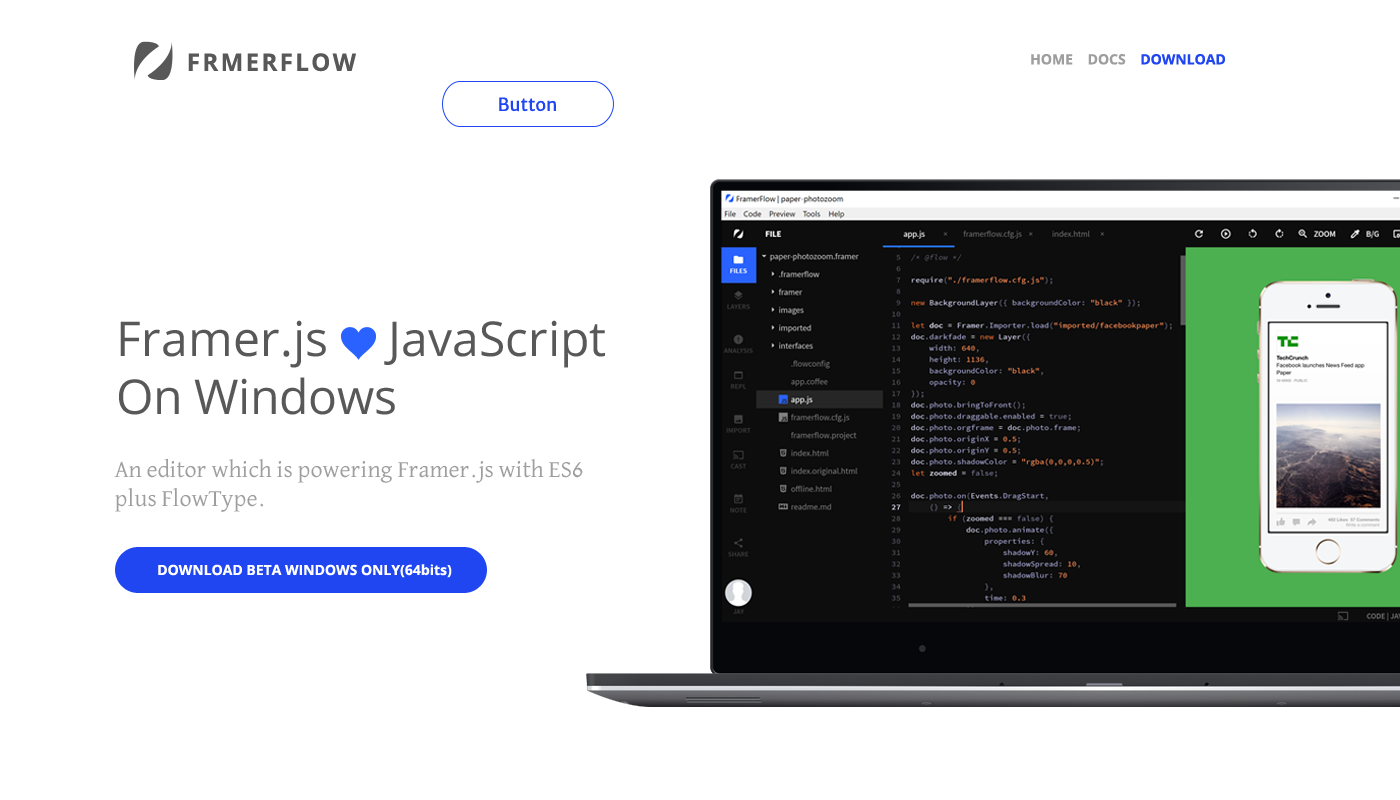
<style>
.page{position:relative;width:1400px;height:800px;background:#ffffff}
.page>*{position:absolute;margin:0}
.t1{font:24px "OpenSans-Bold";letter-spacing:0.1em;color:#585858}
.t2{font:14px "OpenSans-Bold";color:#9e9e9e}
.t3{font:14px "OpenSans-Bold";color:#2046f2}
.t4{font:18px "MerriweatherSans-Regular";color:#2046f2}
.t5{font:48px "OpenSans";color:#585858}
.t6{font:24px "DavidLibre-Regular";color:#9e9e9e}
.t7{font:14px "OpenSans-Bold";color:#ffffff}
</style>
<div class="page">
<p class="t1" style="left:188px;top:53px;width:168px;height:19px">FRMERFLOW</p>
<p class="t2" style="left:1031px;top:54px;width:194px;height:11px">HOME    DOCS    <span class="t3">DOWNLOAD</span></p>
<p class="t4" style="left:499px;top:97px;width:57px;height:15px">Button</p>
<p class="t5" style="left:119px;top:320px;width:486px;height:95px">Framer.js     JavaScript<br>On Windows</p>
<p class="t6" style="left:114px;top:458px;width:469px;height:54px">An editor which is powering Framer.js with ES6<br>plus FlowType.</p>
<p class="t7" style="left:158px;top:564px;width:294px;height:14px">DOWNLOAD BETA WINDOWS ONLY(64bits)</p>
</div>
